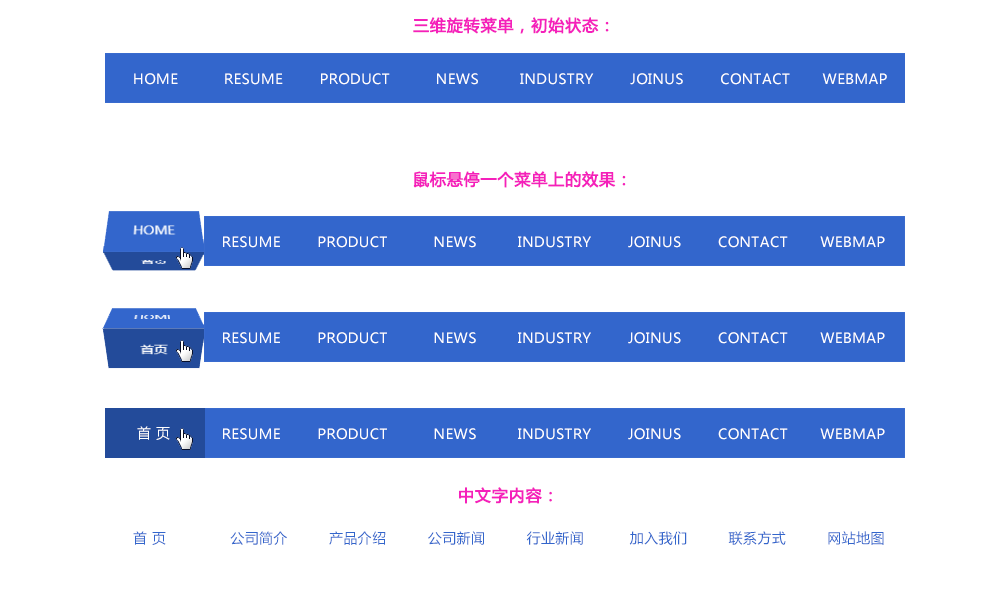
<style>
.page{position:relative;width:1000px;height:600px;background:#ffffff}
.page>*{position:absolute;margin:0}
.t1{font:16px "MicrosoftYaHei";letter-spacing:0.03em;color:#f520bb;font-weight:bold}
.t2{font:14px "MicrosoftYaHei";letter-spacing:0.03em;color:#ffffff}
.t3{font:14px "MicrosoftYaHei";letter-spacing:0.03em;color:#3366cc}
</style>
<div class="page">
<p class="t1" style="left:413px;top:17px;width:196px;height:17px">三维旋转菜单，初始状态：</p>
<p class="t2" style="left:134px;top:73px;width:753px;height:12px">HOME          RESUME        PRODUCT          NEWS         INDUSTRY        JOINUS        CONTACT       WEBMAP</p>
<p class="t1" style="left:413px;top:171px;width:213px;height:17px">鼠标悬停一个菜单上的效果：</p>
<p class="t2" style="left:137px;top:426px;width:33px;height:14px">首 页</p>
<p class="t1" style="left:459px;top:487px;width:93px;height:17px">中文字内容：</p>
<p class="t3" style="left:133px;top:531px;width:751px;height:14px">首 页              公司简介         产品介绍         公司新闻         行业新闻          加入我们         联系方式         网站地图</p>
</div>
